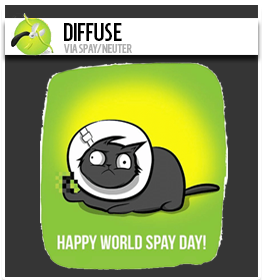
<style>
.page{position:relative;width:263px;height:280px;background:#353535}
.page>*{position:absolute;margin:0}
.t1{font:25px "HomenajeMod-Bold";color:#000000;scale:0.87 1}
.t2{font:12.5px "HomenajeMod-Bold";color:#afafaf;scale:0.87 1}
</style>
<div class="page">
<p class="t1" style="left:64px;top:23px;width:58px;height:18px">DIFFUSE</p>
<p class="t2" style="left:64px;top:44px;width:68px;height:9px">VIA SPAY/NEUTER</p>
</div>
